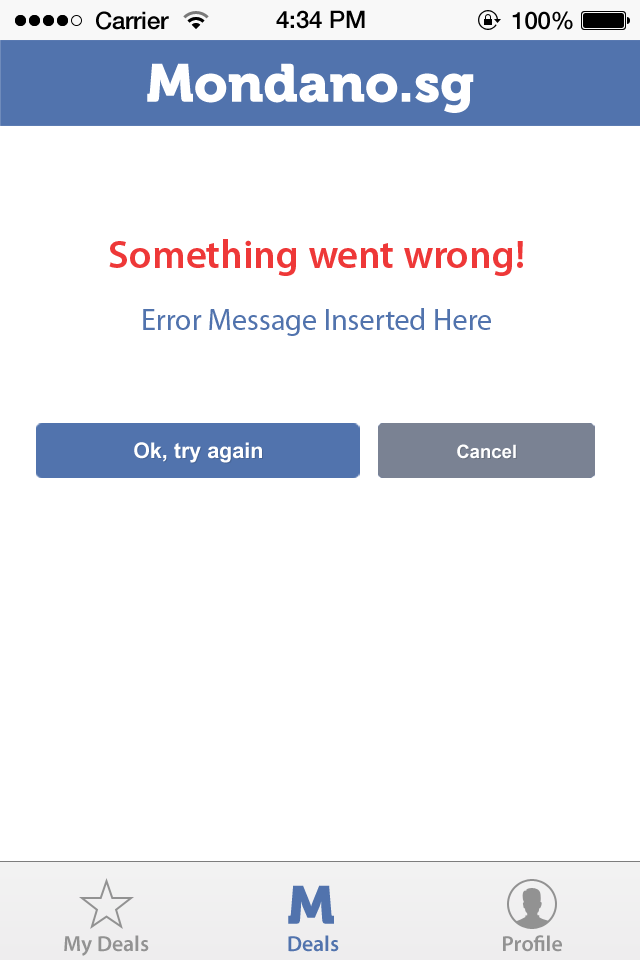
<style>
.page{position:relative;width:640px;height:960px;background:#ffffff}
.page>*{position:absolute;margin:0}
.t1{font:24px "HelveticaNeue-Medium";color:#000000}
.t2{font:53.3px "Museo900-Regular";color:#ffffff}
.t3{font:40px "MyriadPro-Semibold";color:#ee3838}
.t4{font:30px "MyriadPro-Regular";color:#5173ad}
.t5{font:30px "Utsaah-Bold";color:#ffffff}
.t6{font:26px "Utsaah-Bold";color:#ffffff}
.t7{font:53.3px "Museo900-Regular";color:#5173ad}
.t8{font:22px "MyriadPro-Semibold";color:#929292}
.t9{font:22px "MyriadPro-Semibold";color:#5173ad}
</style>
<div class="page">
<p class="t1" style="left:96px;top:11px;width:73px;height:19px">Carrier</p>
<p class="t1" style="left:276px;top:10px;width:89px;height:19px">4:34 PM</p>
<p class="t1" style="left:512px;top:11px;width:61px;height:19px">100%</p>
<p class="t2" style="left:147px;top:63px;width:327px;height:50px">Mondano.sg</p>
<p class="t3" style="left:109px;top:239px;width:414px;height:37px">Something went wrong!</p>
<p class="t4" style="left:143px;top:308px;width:348px;height:28px">Error Message Inserted Here</p>
<p class="t5" style="left:134px;top:442px;width:128px;height:21px">Ok, try again</p>
<p class="t6" style="left:457px;top:444px;width:59px;height:15px">Cancel</p>
<p class="t7" style="left:288px;top:885px;width:46px;height:39px">M</p>
<p class="t8" style="left:64px;top:935px;width:85px;height:21px">My Deals</p>
<p class="t9" style="left:288px;top:935px;width:51px;height:17px">Deals</p>
<p class="t8" style="left:503px;top:935px;width:59px;height:17px">Profile</p>
</div>
